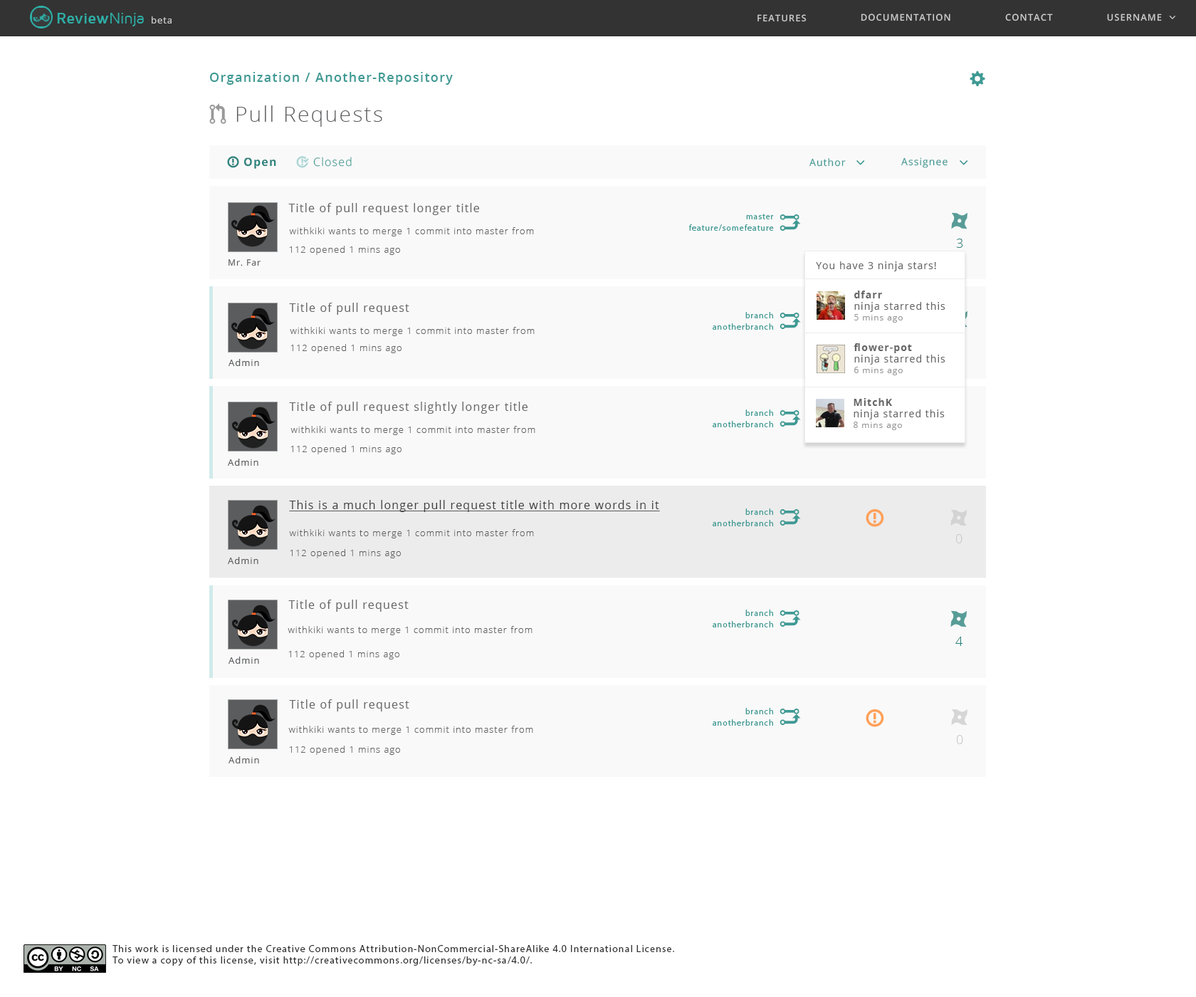
<style>
.page{position:relative;width:1196px;height:997px;background:#ffffff}
.page>*{position:absolute;margin:0}
.t1{font:9.3px "OpenSans";letter-spacing:0.075em;color:#cccccc}
.t2{font:9.3px "OpenSans-Semibold";letter-spacing:0.075em;color:#cccccc}
.t3{font:12.8px "OpenSans-Semibold";letter-spacing:0.075em;color:#3e9a94}
.t4{font:21.4px "OpenSans-Light";letter-spacing:0.075em;color:#5b5c5e}
.t5{font:11.4px "OpenSans-Bold";letter-spacing:0.075em;color:#2c827c}
.t6{font:11.4px "OpenSans-Light";letter-spacing:0.075em;color:#3e9a94}
.t7{font:10px "OpenSans";letter-spacing:0.075em;color:#3e9a94}
.t8{font:11.4px "OpenSans";letter-spacing:0.075em;color:#666666}
.t9{font:8.5px "MyriadPro-Regular";letter-spacing:0.075em;color:#3e9a94}
.t10{font:9.3px "OpenSans-Light";letter-spacing:0.075em;color:#666666}
.t11{font:9.3px "OpenSans-Light";letter-spacing:0.075em;color:#6d6e70}
.t12{font:12.8px "OpenSans-Light";letter-spacing:0.075em;color:#2c827c}
.t13{font:8.7px "OpenSans";letter-spacing:0.075em;color:#5b5c5e}
.t14{font:10px "OpenSans";letter-spacing:0.075em;color:#666666}
.t15{font:10px "OpenSans-Bold";letter-spacing:0.075em;color:#666666}
.t16{font:8.5px "OpenSans";letter-spacing:0.075em;color:#999999}
.t17{font:9.3px "OpenSans";letter-spacing:0.075em;color:#5b5c5e}
.t18{font:11.4px "OpenSans";letter-spacing:0.075em;color:#3c3c3d;text-decoration:underline}
.t19{font:9.3px "OpenSans-Light";letter-spacing:0.075em;color:#5b5c5e}
.t20{font:12.8px "OpenSans-Light";letter-spacing:0.075em;color:#cccccc}
.t21{font:10px/11.4px "MyriadPro-Regular";letter-spacing:0.075em;color:#333333}
</style>
<div class="page">
<p class="t1" style="left:152px;top:16px;width:20px;height:7px">beta</p>
<p class="t2" style="left:758px;top:14px;width:49px;height:8px">FEATURES</p>
<p class="t2" style="left:861px;top:14px;width:90px;height:7px">DOCUMENTATION</p>
<p class="t2" style="left:1005px;top:14px;width:48px;height:7px">CONTACT</p>
<p class="t2" style="left:1107px;top:14px;width:55px;height:7px">USERNAME</p>
<p class="t3" style="left:209px;top:72px;width:244px;height:13px">Organization / Another-Repository</p>
<p class="t4" style="left:236px;top:105px;width:146px;height:22px">Pull Requests</p>
<p class="t5" style="left:244px;top:157px;width:32px;height:12px">Open</p>
<p class="t6" style="left:313px;top:157px;width:39px;height:10px">Closed</p>
<p class="t7" style="left:810px;top:158px;width:36px;height:9px">Author</p>
<p class="t7" style="left:901px;top:157px;width:47px;height:11px">Assignee</p>
<p class="t8" style="left:288px;top:203px;width:191px;height:12px">Title of pull request longer title</p>
<p class="t9" style="left:746px;top:214px;width:28px;height:5px">master</p>
<p class="t10" style="left:289px;top:227px;width:245px;height:9px">withkiki wants to merge 1 commit into master from</p>
<p class="t9" style="left:689px;top:224px;width:85px;height:7px">feature/somefeature</p>
<p class="t11" style="left:289px;top:246px;width:111px;height:9px">112 opened 1 mins ago</p>
<p class="t12" style="left:956px;top:239px;width:7px;height:9px">3</p>
<p class="t13" style="left:229px;top:259px;width:32px;height:7px">Mr. Far</p>
<p class="t14" style="left:816px;top:261px;width:120px;height:10px">You have 3 ninja stars!</p>
<p class="t14" style="left:854px;top:291px;width:92px;height:32px"><span class="t15">dfarr <br></span>ninja starred this<br><span class="t16">5 mins ago</span></p>
<p class="t8" style="left:289px;top:303px;width:120px;height:12px">Title of pull request</p>
<p class="t9" style="left:745px;top:312px;width:28px;height:6px">branch</p>
<p class="t10" style="left:290px;top:327px;width:245px;height:9px">withkiki wants to merge 1 commit into master from</p>
<p class="t9" style="left:713px;top:323px;width:60px;height:7px">anotherbranch</p>
<p class="t10" style="left:291px;top:344px;width:111px;height:9px">112 opened 1 mins ago</p>
<p class="t14" style="left:854px;top:343px;width:92px;height:32px"><span class="t15">flower-pot <br></span>ninja starred this<br><span class="t16">6 mins ago</span></p>
<p class="t17" style="left:229px;top:359px;width:30px;height:7px">Admin</p>
<p class="t8" style="left:289px;top:402px;width:239px;height:12px">Title of pull request slightly longer title</p>
<p class="t14" style="left:854px;top:398px;width:91px;height:32px"><span class="t15">MitchK <br></span>ninja starred this<br><span class="t16">8 mins ago</span></p>
<p class="t9" style="left:745px;top:409px;width:28px;height:7px">branch</p>
<p class="t10" style="left:291px;top:426px;width:244px;height:9px">withkiki wants to merge 1 commit into master from</p>
<p class="t9" style="left:713px;top:421px;width:60px;height:6px">anotherbranch</p>
<p class="t10" style="left:291px;top:445px;width:111px;height:9px">112 opened 1 mins ago</p>
<p class="t17" style="left:228px;top:459px;width:30px;height:7px">Admin</p>
<p class="t18" style="left:289px;top:500px;width:371px;height:12px">This is a much longer pull request title with more words in it</p>
<p class="t9" style="left:745px;top:508px;width:28px;height:7px">branch</p>
<p class="t9" style="left:713px;top:520px;width:60px;height:6px">anotherbranch</p>
<p class="t19" style="left:289px;top:529px;width:245px;height:9px">withkiki wants to merge 1 commit into master from</p>
<p class="t20" style="left:956px;top:534px;width:7px;height:9px">0</p>
<p class="t17" style="left:228px;top:557px;width:30px;height:7px">Admin</p>
<p class="t19" style="left:290px;top:549px;width:111px;height:9px">112 opened 1 mins ago</p>
<p class="t8" style="left:288px;top:600px;width:121px;height:12px">Title of pull request</p>
<p class="t9" style="left:745px;top:609px;width:28px;height:7px">branch</p>
<p class="t10" style="left:288px;top:626px;width:245px;height:9px">withkiki wants to merge 1 commit into master from</p>
<p class="t9" style="left:713px;top:621px;width:60px;height:6px">anotherbranch</p>
<p class="t12" style="left:956px;top:637px;width:7px;height:9px">4</p>
<p class="t10" style="left:288px;top:650px;width:111px;height:9px">112 opened 1 mins ago</p>
<p class="t17" style="left:229px;top:656px;width:30px;height:8px">Admin</p>
<p class="t8" style="left:289px;top:699px;width:120px;height:12px">Title of pull request</p>
<p class="t9" style="left:745px;top:708px;width:28px;height:6px">branch</p>
<p class="t10" style="left:288px;top:726px;width:245px;height:9px">withkiki wants to merge 1 commit into master from</p>
<p class="t9" style="left:713px;top:719px;width:60px;height:7px">anotherbranch</p>
<p class="t20" style="left:956px;top:735px;width:7px;height:9px">0</p>
<p class="t10" style="left:289px;top:745px;width:111px;height:10px">112 opened 1 mins ago</p>
<p class="t17" style="left:229px;top:756px;width:30px;height:7px">Admin</p>
<p class="t21" style="left:113px;top:945px;width:561px;height:21px">This work is licensed under the Creative Commons Attribution-NonCommercial-ShareAlike 4.0 International License. <br>To view a copy of this license, visit http://creativecommons.org/licenses/by-nc-sa/4.0/.</p>
</div>
